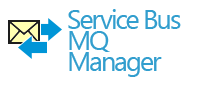
<style>
.page{position:relative;width:200px;height:100px;background:#ffffff}
.page>*{position:absolute;margin:0}
.t1{font:27px/21px "SegoeUI";letter-spacing:-0.075em;color:#329ece}
</style>
<div class="page">
<p class="t1" style="left:68px;top:9px;width:113px;height:68px">Service Bus<br>MQ <br>Manager</p>
</div>
